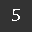
<style>
.page{position:relative;width:32px;height:32px;background:#333333}
.page>*{position:absolute;margin:0}
.t1{font:17.8px "MyriadPro-Regular";color:#ffffff;scale:1.12 1}
</style>
<div class="page">
<p class="t1" style="left:12px;top:9px;width:8px;height:12px">5</p>
</div>
